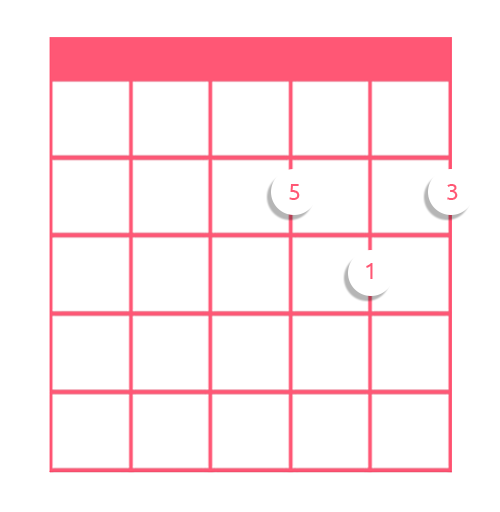
<style>
.page{position:relative;width:500px;height:512px;background:#ffffff}
.page>*{position:absolute;margin:0}
.t1{font:23px "Ubuntu-Regular";color:#ff5775}
</style>
<div class="page">
<p class="t1" style="left:289px;top:184px;width:11px;height:16px">5</p>
<p class="t1" style="left:447px;top:184px;width:11px;height:16px">3</p>
<p class="t1" style="left:366px;top:263px;width:7px;height:16px">1</p>
</div>
